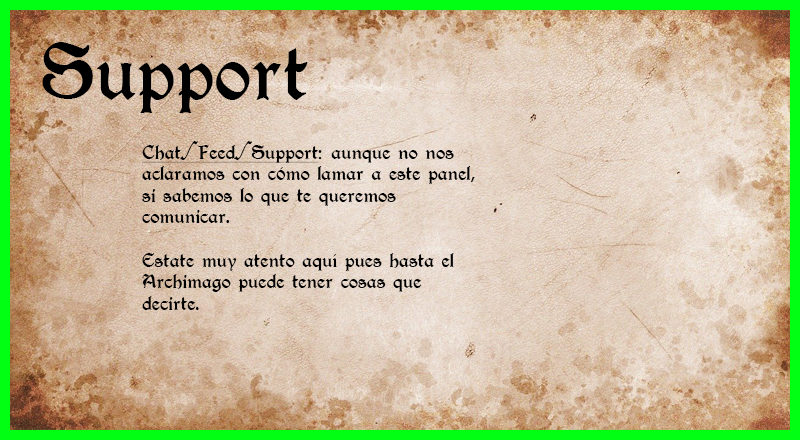
<style>
.page{position:relative;width:800px;height:440px}
.page>*{position:absolute;margin:0}
.t1{font:72px "T4C-Beaulieux";color:#000000}
.t2{font:18px "T4C-Beaulieux";color:#000000}
.t3{font:18px "T4C-Beaulieux";color:#000000;text-decoration:underline}
</style>
<div class="page">
<p class="t1" style="left:42px;top:42px;width:266px;height:71px">Support</p>
<p class="t2" style="left:142px;top:141px;width:333px;height:169px"><span class="t3">Chat/Feed/Support</span>: aunque no nos aclaramos con cómo lamar a este panel, si sabemos lo que te queremos comunicar.<br><br>Estate muy atento aquí pues hasta el Archimago puede tener cosas que decirte.</p>
</div>
